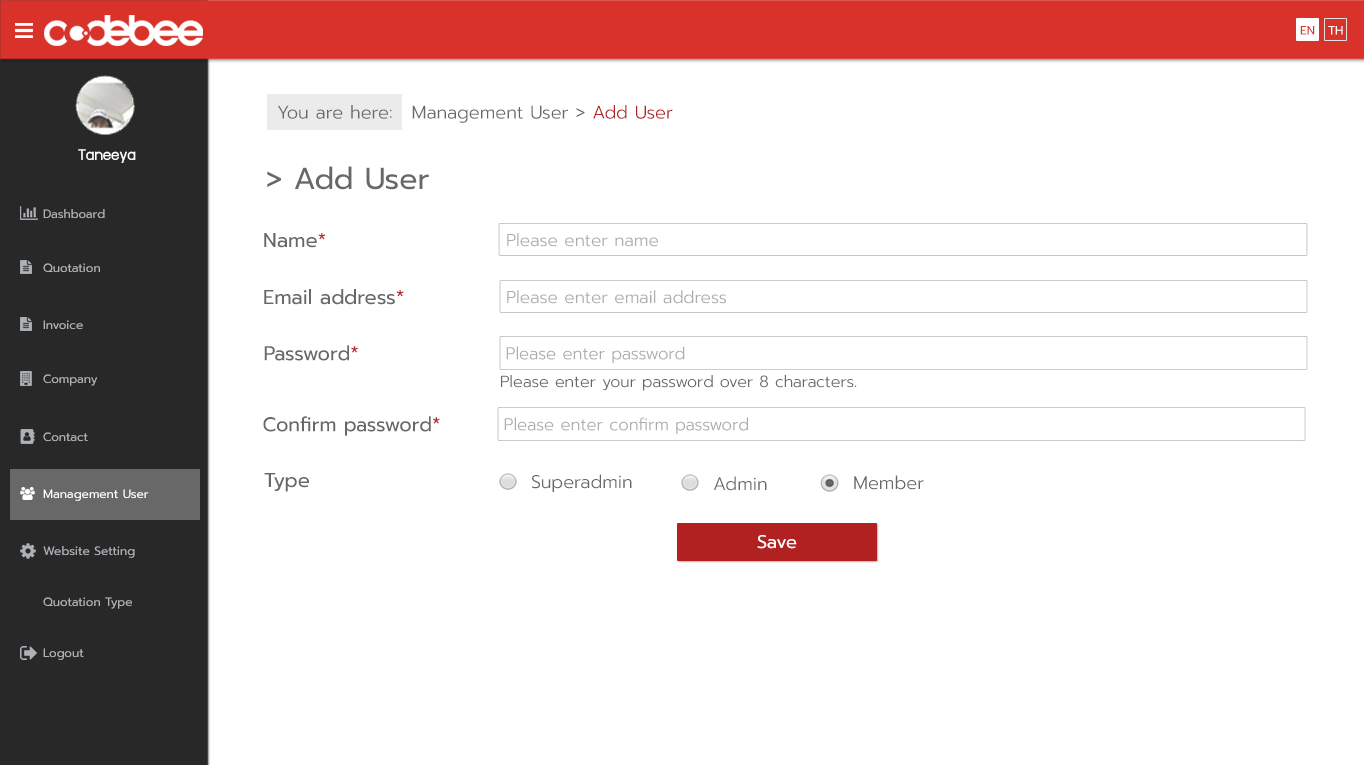
<style>
.page{position:relative;width:1364px;height:765px;background:#ffffff}
.page>*{position:absolute;margin:0}
.t1{font:12px "Prompt-Regular";color:#d8322b}
.t2{font:12px "Prompt-Regular";color:#ffffff}
.t3{font:18px "Prompt-Light";color:#686868}
.t4{font:18px "Prompt-Light";color:#b22121}
.t5{font:18px "supermarket";color:#ffffff}
.t6{font:30px "Prompt-Regular";color:#686868}
.t7{font:12px "Prompt-Regular";color:#aeb2b7}
.t8{font:20px "Prompt-Regular";color:#686868}
.t9{font:20px "Prompt-Regular";color:#b22121}
.t10{font:17px "Prompt-Light";color:#acacac}
.t11{font:16px "Prompt-Light";color:#686868}
.t12{font:17px "Prompt-Light";color:#686868}
.t13{font:18px "Prompt-Regular";color:#ffffff}
</style>
<div class="page">
<p class="t1" style="left:1300px;top:26px;width:15px;height:9px">EN</p>
<p class="t2" style="left:1328px;top:26px;width:15px;height:9px">TH</p>
<p class="t3" style="left:278px;top:105px;width:114px;height:14px">You are here:</p>
<p class="t3" style="left:412px;top:105px;width:261px;height:18px">Management User &gt; <span class="t4">Add User</span></p>
<p class="t5" style="left:78px;top:149px;width:58px;height:14px">Taneeya</p>
<p class="t6" style="left:267px;top:166px;width:162px;height:24px">&gt; Add User</p>
<p class="t7" style="left:43px;top:209px;width:62px;height:10px">Dashboard</p>
<p class="t8" style="left:264px;top:233px;width:62px;height:15px">Name<span class="t9">*</span></p>
<p class="t10" style="left:507px;top:233px;width:151px;height:14px">Please enter name</p>
<p class="t7" style="left:43px;top:263px;width:57px;height:10px">Quotation</p>
<p class="t8" style="left:264px;top:289px;width:140px;height:16px">Email address<span class="t9">*</span></p>
<p class="t10" style="left:507px;top:290px;width:219px;height:14px">Please enter email address</p>
<p class="t7" style="left:43px;top:320px;width:40px;height:10px">Invoice</p>
<p class="t8" style="left:264px;top:345px;width:94px;height:16px">Password<span class="t9">*</span></p>
<p class="t10" style="left:506px;top:346px;width:179px;height:17px">Please enter password</p>
<p class="t7" style="left:43px;top:374px;width:55px;height:12px">Company</p>
<p class="t11" style="left:501px;top:375px;width:356px;height:16px">Please enter your password over 8 characters<span class="t12">.</span></p>
<p class="t8" style="left:263px;top:416px;width:177px;height:20px">Confirm password<span class="t9">*</span></p>
<p class="t10" style="left:504px;top:417px;width:244px;height:17px">Please enter confirm password</p>
<p class="t7" style="left:43px;top:432px;width:45px;height:10px">Contact</p>
<p class="t8" style="left:264px;top:473px;width:45px;height:19px">Type</p>
<p class="t3" style="left:532px;top:474px;width:100px;height:18px">Superadmin</p>
<p class="t3" style="left:714px;top:476px;width:53px;height:15px">Admin</p>
<p class="t3" style="left:854px;top:475px;width:70px;height:15px">Member</p>
<p class="t2" style="left:43px;top:489px;width:106px;height:12px">Management User</p>
<p class="t13" style="left:757px;top:535px;width:40px;height:14px">Save</p>
<p class="t7" style="left:43px;top:546px;width:92px;height:12px">Website Setting</p>
<p class="t7" style="left:43px;top:597px;width:89px;height:12px">Quotation Type</p>
<p class="t7" style="left:43px;top:648px;width:41px;height:12px">Logout</p>
</div>
